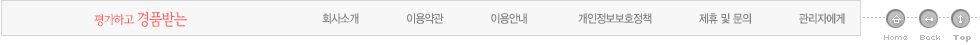
<style>
.page{position:relative;width:980px;height:45px;background:#f7f7f7}
.page>*{position:absolute;margin:0}
.t1{font:12.7px "CreMjoM";letter-spacing:-0.05em;color:#ff5c5c;scale:0.87 1}
.t2{font:15.9px "CreMjoM";letter-spacing:-0.05em;color:#ff5c5c;scale:0.87 1}
.t3{font:11.7px "YDIYGO330";letter-spacing:-0.05em;color:#828282;scale:0.91 1}
.t4{font:8px "Kroeger0553";color:#b8b8b8}
.t5{font:8px "Kroeger0553";color:#b8b8b8;font-weight:bold}
</style>
<div class="page">
<p class="t1" style="left:94px;top:11px;width:93px;height:16px">평가하고 <span class="t2">경품받는</span></p>
<p class="t3" style="left:322px;top:13px;width:523px;height:11px">회사소개               이용약관               이용안내                개인정보보호정책               제휴 및 문의               관리자에게</p>
<p class="t4" style="left:884px;top:35px;width:87px;height:7px">Home    Back    <span class="t5">Top</span></p>
</div>
